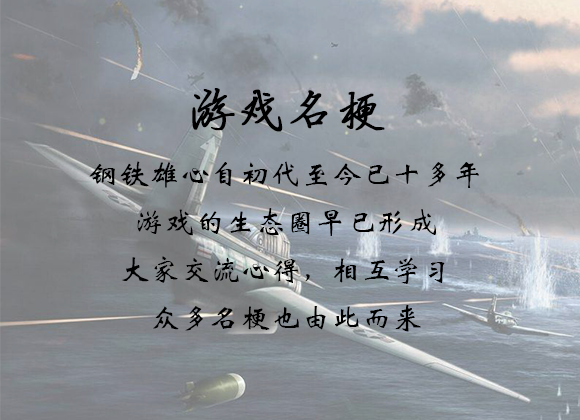
<style>
.page{position:relative;width:580px;height:420px}
.page>*{position:absolute;margin:0}
.t1{font:30px/48px "STXinwei";letter-spacing:0.01em;color:#000000}
.t2{font:48px/72px "FZYBXSJW--GB1-0";letter-spacing:0.01em;color:#000000;font-weight:bold}
</style>
<div class="page">
<p class="t1" style="left:89px;top:88px;width:390px;height:244px;text-align:center"><span class="t2">游戏名梗<br></span>钢铁雄心自初代至今已十多年<br>游戏的生态圈早已形成<br>大家交流心得，相互学习<br>众多名梗也由此而来</p>
</div>
